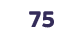
<style>
.page{position:relative;width:80px;height:40px;background:#ffffff}
.page>*{position:absolute;margin:0}
.t1{font:23px "CoHeadlineCorp-Bold";color:#342c59}
</style>
<div class="page">
<p class="t1" style="left:29px;top:11px;width:25px;height:17px">75</p>
</div>
